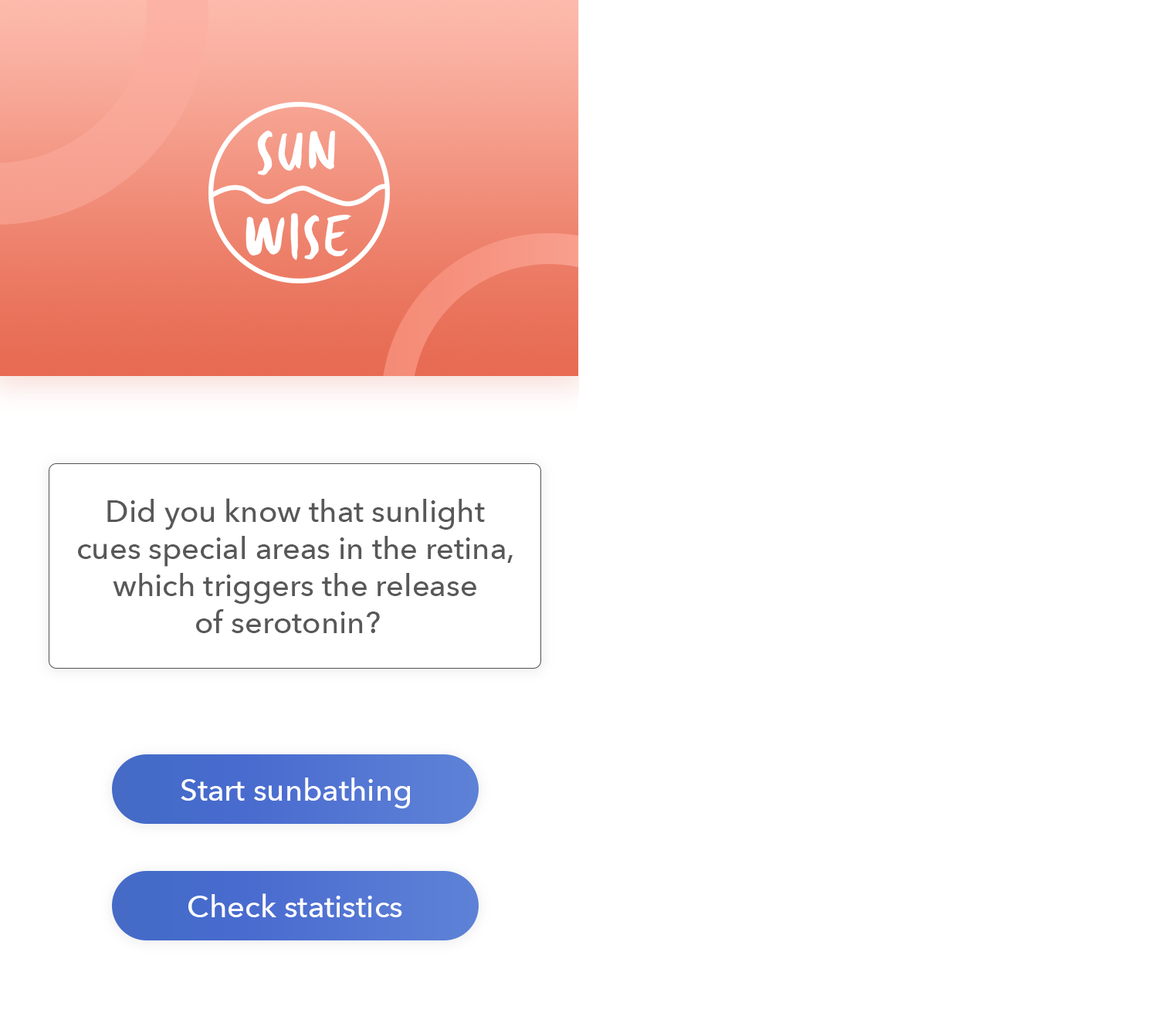
<style>
.page{position:relative;width:1158px;height:1030px;background:#ffffff}
.page>*{position:absolute;margin:0}
.t1{font:30.9px "AvenirNext-Medium";color:#585858}
.t2{font:30.9px "AvenirNext-Medium";color:#ffffff}
</style>
<div class="page">
<p class="t1" style="left:78px;top:498px;width:435px;height:135px;text-align:center">Did you know that sunlight <br>cues special areas in the retina, <br>which triggers the release <br>of serotonin?</p>
<p class="t2" style="left:181px;top:777px;width:229px;height:31px">Start sunbathing</p>
<p class="t2" style="left:188px;top:893px;width:214px;height:24px">Check statistics</p>
</div>
